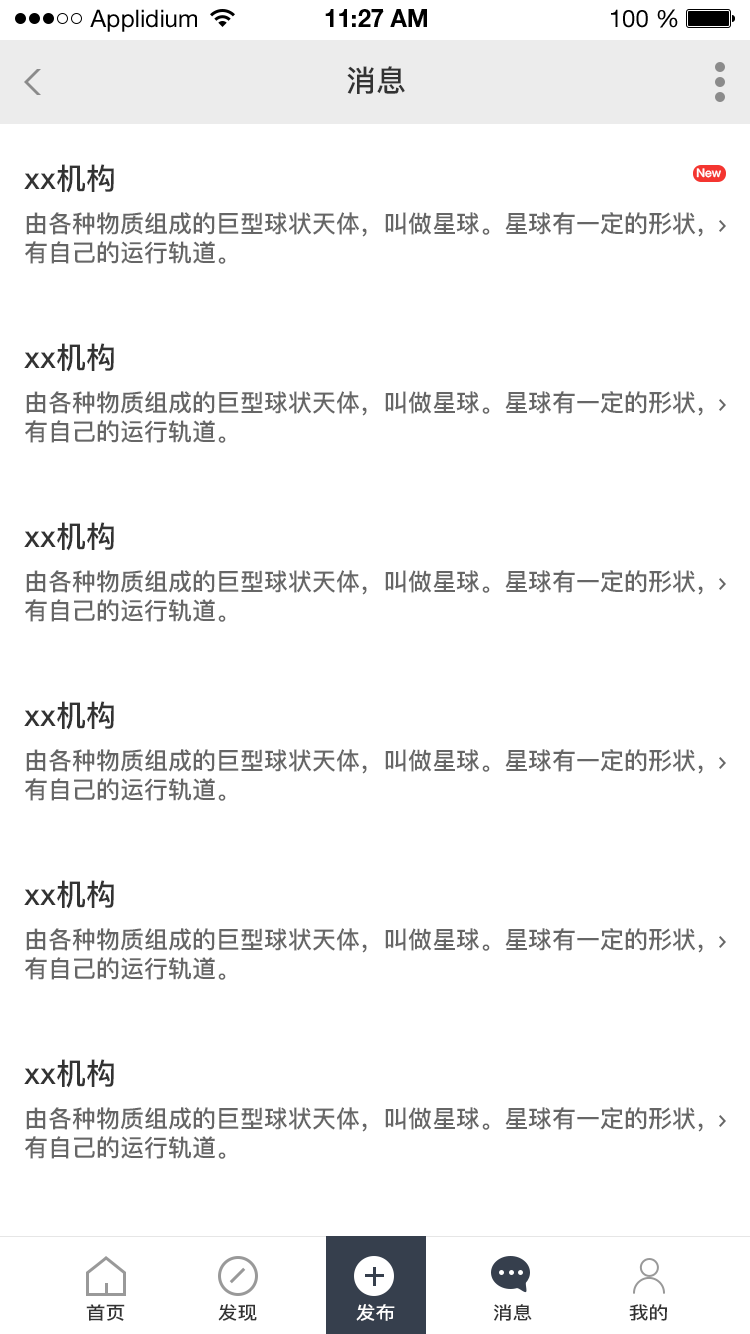
<style>
.page{position:relative;width:750px;height:1334px;background:#ffffff}
.page>*{position:absolute;margin:0}
.t1{font:24px "HelveticaNeueLTStd-Roman";color:#000000}
.t2{font:24px "HelveticaNeueLTStd-Bd";color:#000000}
.t3{font:30px "PingFang-SC-Bold";color:#333333}
.t4{font:12px "PingFang-SC-Bold";color:#ffffff}
.t5{font:24px "PingFang-SC-Bold";color:#666666}
.t6{font:18px "PingFang-SC-Bold";color:#333333;scale:1.1 1}
.t7{font:18px "PingFang-SC-Bold";color:#ffffff;scale:1.1 1}
</style>
<div class="page">
<p class="t1" style="left:90px;top:9px;width:107px;height:23px">Applidium</p>
<p class="t2" style="left:325px;top:9px;width:102px;height:18px">11:27 AM</p>
<p class="t1" style="left:611px;top:9px;width:67px;height:19px">100 %</p>
<p class="t3" style="left:347px;top:66px;width:58px;height:28px">消息</p>
<p class="t3" style="left:24px;top:164px;width:90px;height:29px">xx机构</p>
<p class="t4" style="left:696px;top:168px;width:25px;height:10px">New</p>
<p class="t5" style="left:25px;top:212px;width:678px;height:52px">由各种物质组成的巨型球状天体，叫做星球。星球有一定的形状，<br>有自己的运行轨道。</p>
<p class="t3" style="left:24px;top:343px;width:90px;height:29px">xx机构</p>
<p class="t5" style="left:25px;top:391px;width:678px;height:52px">由各种物质组成的巨型球状天体，叫做星球。星球有一定的形状，<br>有自己的运行轨道。</p>
<p class="t3" style="left:24px;top:522px;width:90px;height:29px">xx机构</p>
<p class="t5" style="left:25px;top:570px;width:678px;height:52px">由各种物质组成的巨型球状天体，叫做星球。星球有一定的形状，<br>有自己的运行轨道。</p>
<p class="t3" style="left:24px;top:701px;width:90px;height:29px">xx机构</p>
<p class="t5" style="left:25px;top:749px;width:678px;height:52px">由各种物质组成的巨型球状天体，叫做星球。星球有一定的形状，<br>有自己的运行轨道。</p>
<p class="t3" style="left:24px;top:880px;width:90px;height:29px">xx机构</p>
<p class="t5" style="left:25px;top:928px;width:678px;height:52px">由各种物质组成的巨型球状天体，叫做星球。星球有一定的形状，<br>有自己的运行轨道。</p>
<p class="t3" style="left:24px;top:1059px;width:90px;height:29px">xx机构</p>
<p class="t5" style="left:25px;top:1107px;width:678px;height:52px">由各种物质组成的巨型球状天体，叫做星球。星球有一定的形状，<br>有自己的运行轨道。</p>
<p class="t6" style="left:86px;top:1304px;width:39px;height:17px">首页</p>
<p class="t6" style="left:218px;top:1304px;width:39px;height:17px">发现</p>
<p class="t7" style="left:356px;top:1304px;width:39px;height:17px">发布</p>
<p class="t6" style="left:493px;top:1304px;width:39px;height:17px">消息</p>
<p class="t6" style="left:629px;top:1304px;width:38px;height:17px">我的</p>
</div>
